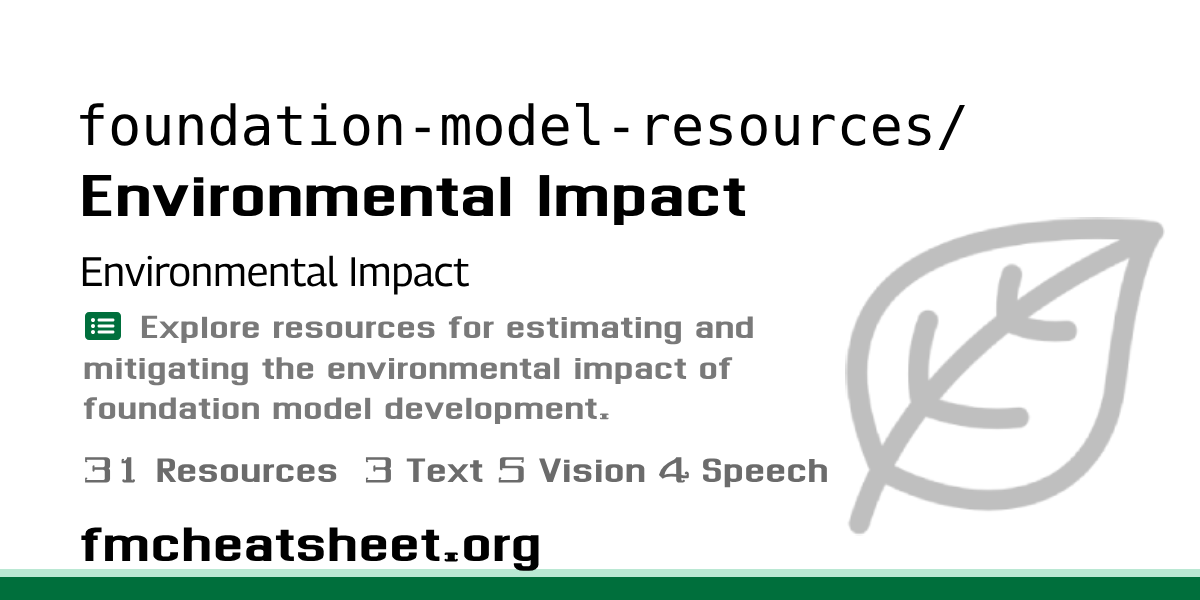
<style>
.page{position:relative;width:1200px;height:600px;background:#ffffff}
.page>*{position:absolute;margin:0}
.t1{font:55px "DejaVuSansMono";color:#000000}
.t2{font:85px "Dhurjati";color:#000000}
.t3{font:41px "Georama-Regular";color:#000000}
.t4{font:46px "Dhurjati";letter-spacing:-0.002em;color:#797979}
.t5{font:49px "Dhurjati";letter-spacing:-0.002em;color:#6b6b6b}
.t6{font:71px "Dhurjati";color:#000000}
</style>
<div class="page">
<p class="t1" style="left:80px;top:102px;width:885px;height:49px">foundation-model-resources/</p>
<p class="t2" style="left:83px;top:175px;width:663px;height:51px">Environmental Impact</p>
<p class="t3" style="left:82px;top:255px;width:388px;height:40px">Environmental Impact</p>
<p class="t4" style="left:83px;top:315px;width:670px;height:109px">Explore resources for estimating and<br>mitigating the environmental impact of <br>foundation model development.</p>
<p class="t5" style="left:85px;top:457px;width:742px;height:31px">31 Resources  3 Text 5 Vision 4 Speech</p>
<p class="t6" style="left:81px;top:527px;width:458px;height:44px">fmcheatsheet.org</p>
</div>
